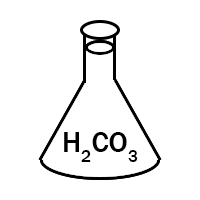
<style>
.page{position:relative;width:200px;height:200px;background:#ffffff}
.page>*{position:absolute;margin:0}
.t1{font:30px "FranklinGothic-Medium";color:#000000}
</style>
<div class="page">
<p class="t1" style="left:64px;top:132px;width:74px;height:30px">H2CO3</p>
</div>
